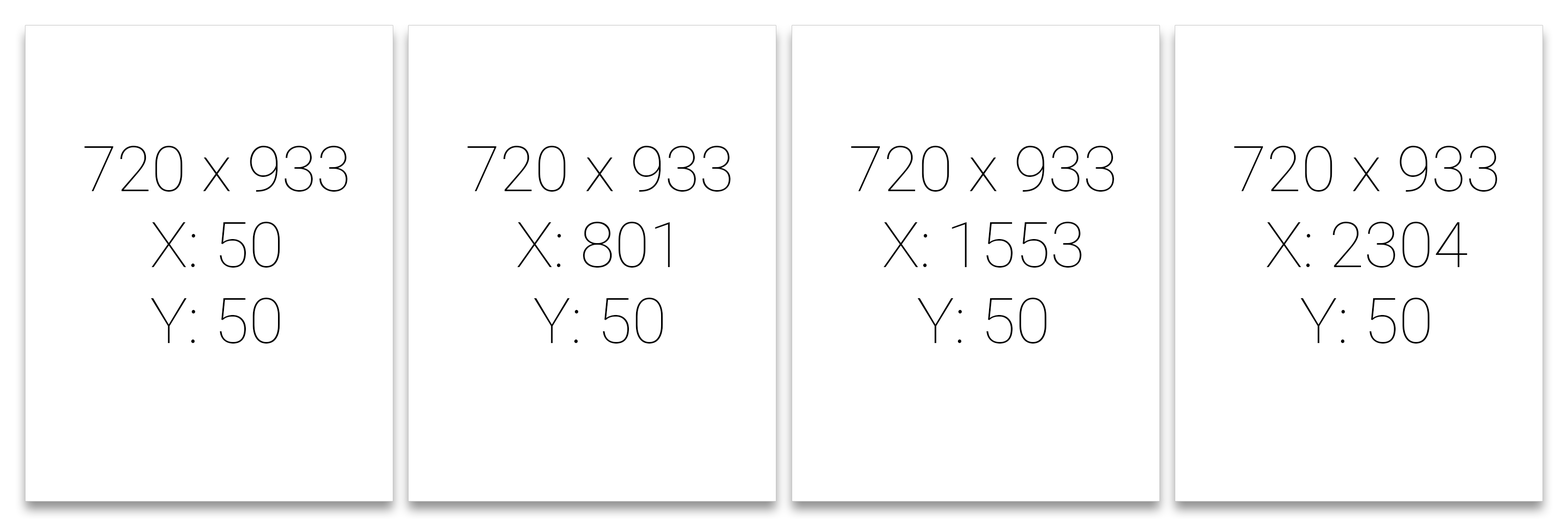
<style>
.page{position:relative;width:1568px;height:525px;background:#ffffff}
.page>*{position:absolute;margin:0}
.t1{font:63.3px "Roboto-Thin";color:#000000}
</style>
<div class="page">
<p class="t1" style="left:84px;top:146px;width:263px;height:198px;text-align:center">720 x 933<br>X: 50<br>Y: 50</p>
<p class="t1" style="left:467px;top:146px;width:263px;height:198px;text-align:center">720 x 933<br>X: 801 <br>Y: 50</p>
<p class="t1" style="left:851px;top:146px;width:263px;height:198px;text-align:center">720 x 933<br>X: 1553<br>Y: 50</p>
<p class="t1" style="left:1234px;top:146px;width:263px;height:198px;text-align:center">720 x 933<br>X: 2304<br>Y: 50</p>
</div>
